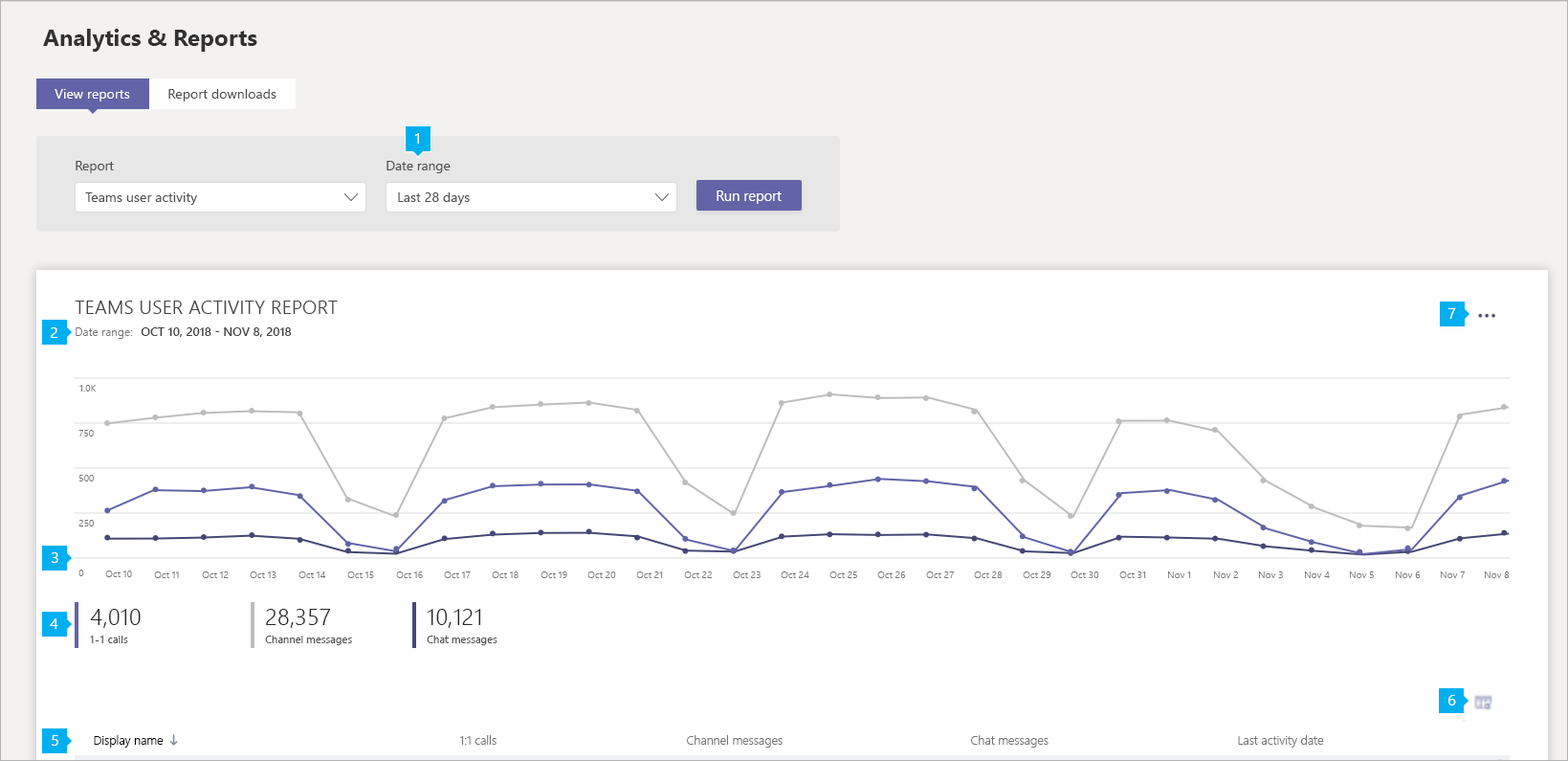
<style>
.page{position:relative;width:1568px;height:761px;background:#ffffff}
.page>*{position:absolute;margin:0}
.t1{font:23px "SegoeUI-Bold";color:#323131}
.t2{font:13.6px "SegoeUI";color:#ffffff}
.t3{font:13.6px "SegoeUI";color:#505050}
.t4{font:15.3px "SegoeUI";color:#ffffff}
.t5{font:13.2px "SegoeUI";color:#505050}
.t6{font:13.9px "SegoeUI";color:#ffffff}
.t7{font:19.5px "SegoeUI-Semilight";color:#454444}
.t8{font:11.6px "SegoeUI-Semilight";color:#757575}
.t9{font:12.3px "SegoeUI-Semibold";color:#454444}
.t10{font:9.9px "SegoeUI-Semilight";color:#757575}
.t11{font:23.3px "SegoeUI-Semilight";color:#272727}
.t12{font:10.7px "SegoeUI";color:#505050}
.t13{font:12.1px "SegoeUI-Semilight";color:#000000}
.t14{font:12.1px "SegoeUI-Semilight";color:#757575}
</style>
<div class="page">
<p class="t1" style="left:43px;top:29px;width:214px;height:23px">Analytics &amp; Reports</p>
<p class="t2" style="left:55px;top:89px;width:75px;height:12px">View reports</p>
<p class="t3" style="left:168px;top:89px;width:108px;height:12px">Report downloads</p>
<p class="t4" style="left:414px;top:133px;width:5px;height:10px">1</p>
<p class="t5" style="left:76px;top:161px;width:38px;height:12px">Report</p>
<p class="t5" style="left:386px;top:161px;width:65px;height:12px">Date range</p>
<p class="t3" style="left:85px;top:192px;width:112px;height:13px">Teams user activity</p>
<p class="t3" style="left:398px;top:192px;width:72px;height:13px">Last 28 days</p>
<p class="t6" style="left:717px;top:190px;width:65px;height:14px">Run report</p>
<p class="t7" style="left:75px;top:300px;width:263px;height:14px">TEAMS USER ACTIVITY REPORT</p>
<p class="t4" style="left:1447px;top:308px;width:9px;height:11px">7</p>
<p class="t4" style="left:51px;top:327px;width:7px;height:11px">2</p>
<p class="t8" style="left:76px;top:327px;width:57px;height:12px">Date range:</p>
<p class="t9" style="left:141px;top:327px;width:151px;height:10px">OCT 10, 2018 - NOV 8, 2018</p>
<p class="t10" style="left:79px;top:385px;width:18px;height:6px">1.0K</p>
<p class="t10" style="left:78px;top:430px;width:16px;height:6px">750</p>
<p class="t10" style="left:78px;top:474px;width:16px;height:7px">500</p>
<p class="t10" style="left:78px;top:519px;width:16px;height:7px">250</p>
<p class="t4" style="left:52px;top:552px;width:6px;height:10px">3</p>
<p class="t10" style="left:78px;top:569px;width:6px;height:7px">0</p>
<p class="t10" style="left:105px;top:570px;width:27px;height:7px">Oct 10</p>
<p class="t10" style="left:154px;top:571px;width:25px;height:7px">Oct 11</p>
<p class="t10" style="left:202px;top:571px;width:27px;height:7px">Oct 12</p>
<p class="t10" style="left:250px;top:571px;width:26px;height:7px">Oct 13</p>
<p class="t10" style="left:298px;top:571px;width:28px;height:7px">Oct 14</p>
<p class="t10" style="left:347px;top:571px;width:27px;height:7px">Oct 15</p>
<p class="t10" style="left:396px;top:571px;width:27px;height:7px">Oct 16</p>
<p class="t10" style="left:444px;top:571px;width:27px;height:7px">Oct 17</p>
<p class="t10" style="left:492px;top:571px;width:26px;height:7px">Oct 18</p>
<p class="t10" style="left:540px;top:571px;width:27px;height:7px">Oct 19</p>
<p class="t10" style="left:587px;top:571px;width:29px;height:7px">Oct 20</p>
<p class="t10" style="left:636px;top:571px;width:27px;height:7px">Oct 21</p>
<p class="t10" style="left:684px;top:571px;width:28px;height:7px">Oct 22</p>
<p class="t10" style="left:733px;top:571px;width:28px;height:7px">Oct 23</p>
<p class="t10" style="left:781px;top:571px;width:28px;height:7px">Oct 24</p>
<p class="t10" style="left:829px;top:571px;width:28px;height:7px">Oct 25</p>
<p class="t10" style="left:877px;top:571px;width:29px;height:7px">Oct 26</p>
<p class="t10" style="left:926px;top:571px;width:29px;height:7px">Oct 27</p>
<p class="t10" style="left:974px;top:571px;width:29px;height:7px">Oct 28</p>
<p class="t10" style="left:1023px;top:571px;width:28px;height:7px">Oct 29</p>
<p class="t10" style="left:1070px;top:571px;width:29px;height:7px">Oct 30</p>
<p class="t10" style="left:1119px;top:571px;width:27px;height:7px">Oct 31</p>
<p class="t10" style="left:1168px;top:571px;width:23px;height:7px">Nov 1</p>
<p class="t10" style="left:1214px;top:571px;width:24px;height:7px">Nov 2</p>
<p class="t10" style="left:1259px;top:571px;width:24px;height:7px">Nov 3</p>
<p class="t10" style="left:1305px;top:571px;width:25px;height:7px">Nov 4</p>
<p class="t10" style="left:1350px;top:571px;width:24px;height:7px">Nov 5</p>
<p class="t10" style="left:1396px;top:571px;width:25px;height:7px">Nov 6</p>
<p class="t10" style="left:1441px;top:571px;width:25px;height:7px">Nov 7</p>
<p class="t10" style="left:1485px;top:571px;width:25px;height:7px">Nov 8</p>
<p class="t4" style="left:50px;top:618px;width:8px;height:11px">4</p>
<p class="t11" style="left:90px;top:608px;width:51px;height:20px">4,010</p>
<p class="t11" style="left:266px;top:608px;width:65px;height:20px">28,357</p>
<p class="t11" style="left:427px;top:608px;width:54px;height:20px">10,121</p>
<p class="t12" style="left:90px;top:635px;width:38px;height:8px">1-1 calls</p>
<p class="t12" style="left:265px;top:635px;width:87px;height:10px">Channel messages</p>
<p class="t12" style="left:427px;top:635px;width:70px;height:10px">Chat messages</p>
<p class="t4" style="left:1448px;top:695px;width:8px;height:10px">6</p>
<p class="t4" style="left:52px;top:735px;width:6px;height:10px">5</p>
<p class="t13" style="left:94px;top:735px;width:70px;height:12px">Display name</p>
<p class="t14" style="left:459px;top:735px;width:37px;height:9px">1:1 calls</p>
<p class="t14" style="left:687px;top:735px;width:96px;height:12px">Channel messages</p>
<p class="t14" style="left:971px;top:735px;width:77px;height:12px">Chat messages</p>
<p class="t14" style="left:1238px;top:735px;width:86px;height:12px">Last activity date</p>
</div>
